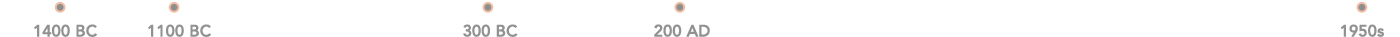
<style>
.page{position:relative;width:1400px;height:37px;background:#ffffff}
.page>*{position:absolute;margin:0}
.t1{font:16px "Avenir-Medium";color:#919191;font-weight:bold}
</style>
<div class="page">
<p class="t1" style="left:34px;top:24px;width:63px;height:13px">1400 BC</p>
<p class="t1" style="left:148px;top:24px;width:63px;height:13px">1100 BC</p>
<p class="t1" style="left:463px;top:24px;width:55px;height:13px">300 BC</p>
<p class="t1" style="left:654px;top:24px;width:56px;height:13px">200 AD</p>
<p class="t1" style="left:1341px;top:24px;width:43px;height:13px">1950s</p>
</div>
